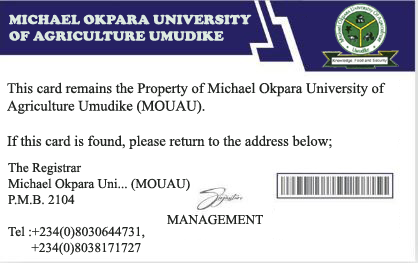
<style>
.page{position:relative;width:418px;height:263px;background:#ffffff}
.page>*{position:absolute;margin:0}
.t1{font:13.7px "CooperBlack";color:#dce9e0;scale:1.04 1}
.t2{font:14.7px "TimesNewRomanPSMT";color:#212421}
.t3{font:13.3px "TimesNewRomanPSMT";color:#212421}
</style>
<div class="page">
<p class="t1" style="left:9px;top:14px;width:243px;height:27px">MICHAEL OKPARA UNIVERSITY<br>OF AGRICULTURE UMUDIKE</p>
<p class="t2" style="left:7px;top:82px;width:379px;height:67px">This card remains the Property of Michael Okpara University of<br>Agriculture Umudike (MOUAU).<br><br>If this card is found, please return to the address below;</p>
<p class="t3" style="left:8px;top:162px;width:182px;height:93px">The Registrar<br>Michael Okpara Uni... (MOUAU)<br>P.M.B. 2104<br><br>Tel :+234(0)8030644731,<br>       +234(0)8038171727</p>
<p class="t3" style="left:167px;top:214px;width:96px;height:11px">MANAGEMENT</p>
</div>
